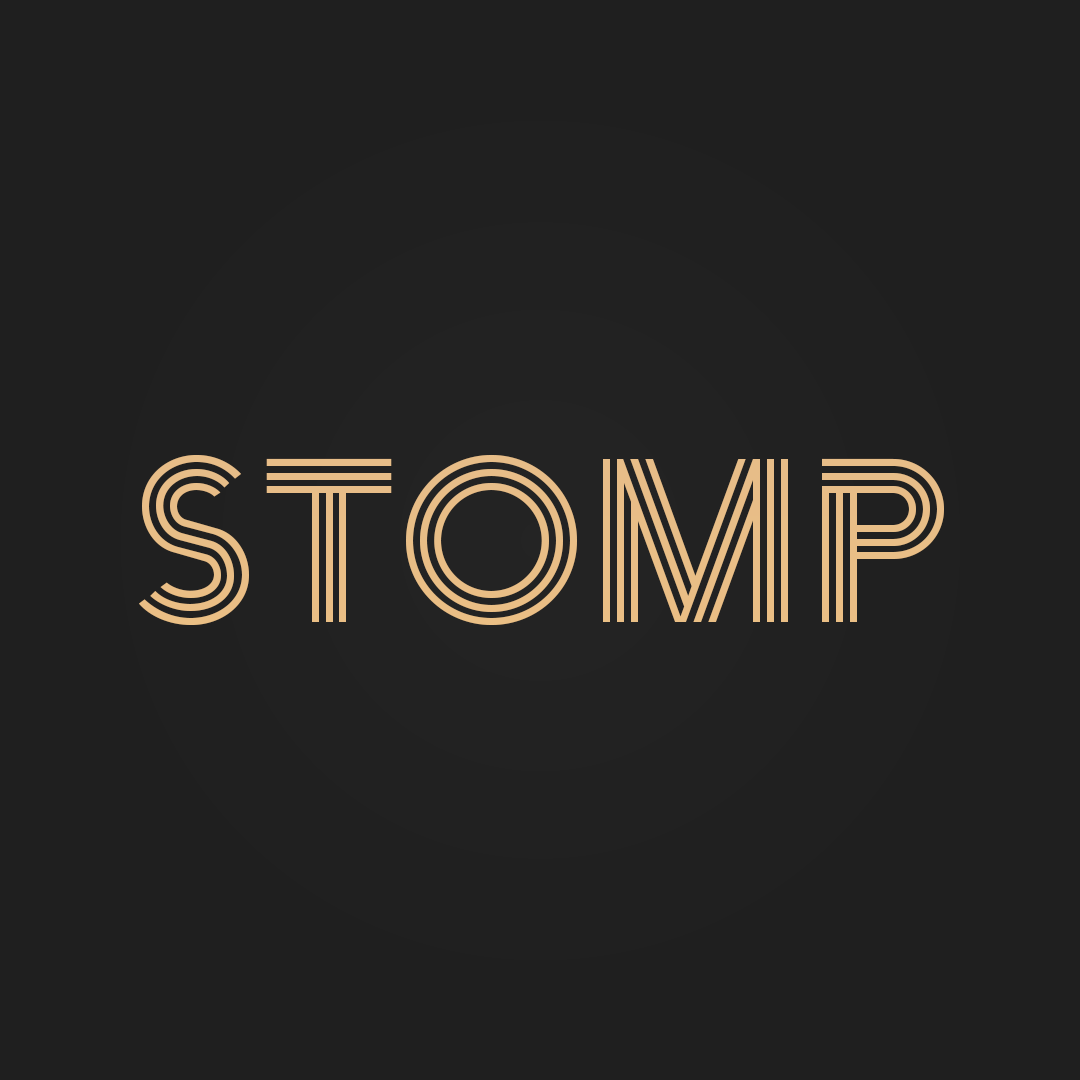
<style>
.page{position:relative;width:1080px;height:1080px;background:#1f1f1f}
.page>*{position:absolute;margin:0}
.t1{font:231.7px "Arya-Triple";color:#e8be87}
</style>
<div class="page">
<p class="t1" style="left:139px;top:454px;width:805px;height:171px">stomp</p>
</div>
